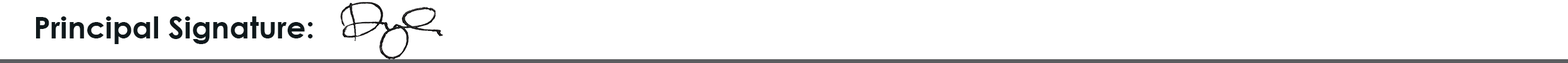
<style>
.page{position:relative;width:1568px;height:63px;background:#ffffff}
.page>*{position:absolute;margin:0}
.t1{font:30.3px "CenturyGothic-Bold";color:#10191c}
</style>
<div class="page">
<p class="t1" style="left:36px;top:16px;width:277px;height:28px">Principal Signature:</p>
</div>
